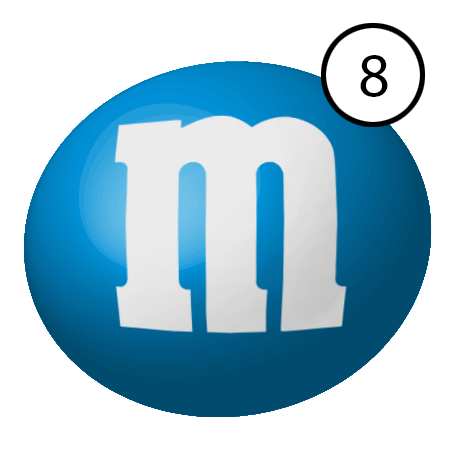
<style>
.page{position:relative;width:451px;height:451px;background:#ffffff}
.page>*{position:absolute;margin:0}
.t1{font:62.5px "MyriadPro-Regular";letter-spacing:0.02em;color:#000000}
</style>
<div class="page">
<p class="t1" style="left:360px;top:55px;width:28px;height:42px">8</p>
</div>
